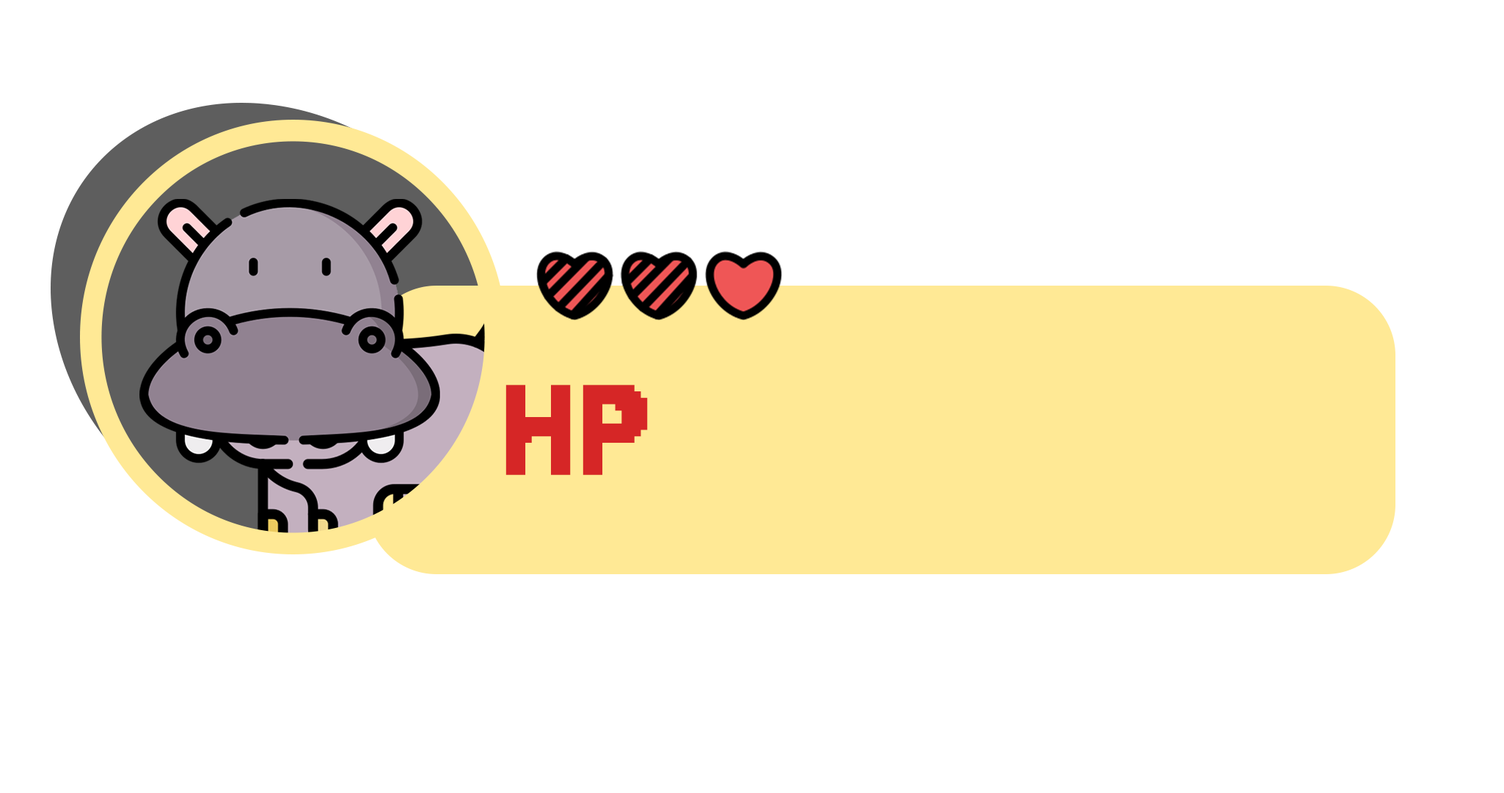
<style>
.page{position:relative;width:1504px;height:793px;background:#ffffff}
.page>*{position:absolute;margin:0}
.t1{font:102.7px "Pixelroborobo-Medium";color:#d62626}
</style>
<div class="page">
<p class="t1" style="left:506px;top:385px;width:142px;height:90px">HP</p>
</div>
